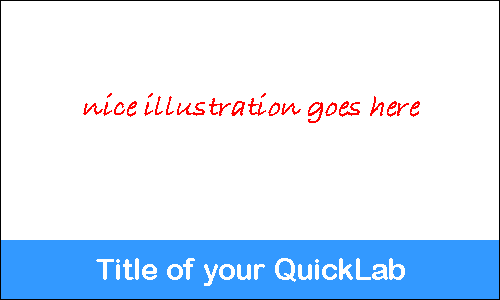
<style>
.page{position:relative;width:500px;height:300px;background:#ffffff}
.page>*{position:absolute;margin:0}
.t1{font:30px "BradleyHandITCTT-Bold";color:#ff0000;font-style:italic}
.t2{font:30px "ArialRoundedMTBold";color:#ffffff}
</style>
<div class="page">
<p class="t1" style="left:83px;top:93px;width:337px;height:30px">nice illustration goes here</p>
<p class="t2" style="left:96px;top:258px;width:309px;height:28px">Title of your QuickLab</p>
</div>
